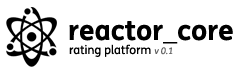
<style>
.page{position:relative;width:240px;height:72px;background:#ffffff}
.page>*{position:absolute;margin:0}
.t1{font:28px "FSMe-Bold";color:#000000}
.t2{font:28px "MyriadPro-Regular";color:#000000}
.t3{font:12px "FSMe";color:#000000}
.t4{font:9px "FSMe-Italic";color:#606060}
</style>
<div class="page">
<p class="t1" style="left:69px;top:21px;width:164px;height:23px">reactor<span class="t2">_</span>core</p>
<p class="t3" style="left:69px;top:44px;width:104px;height:13px">rating platform <span class="t4">v 0.1</span></p>
</div>
